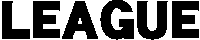
<style>
.page{position:relative;width:200px;height:40px;background:#000000}
.page>*{position:absolute;margin:0}
.t1{font:48px "DFGothic-SU-WINP-RKSJ-H";color:#000000}
</style>
<div class="page">
<p class="t1" style="left:2px;top:0px;width:197px;height:40px">LEAGUE</p>
</div>
